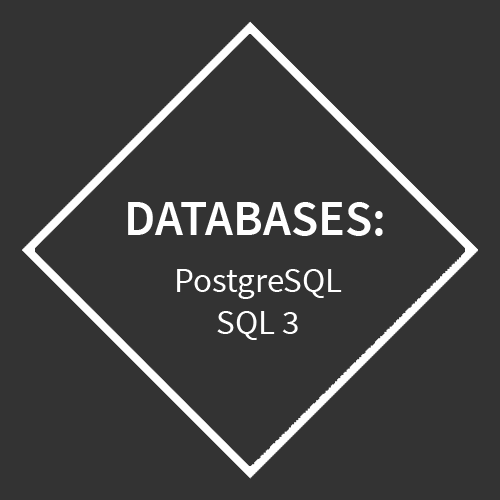
<style>
.page{position:relative;width:500px;height:500px;background:#333333}
.page>*{position:absolute;margin:0}
.t1{font:35px "SourceSansPro-Regular";color:#ffffff}
</style>
<div class="page">
<p class="t1" style="left:177px;top:269px;width:165px;height:71px;text-align:center">PostgreSQL<br>SQL 3</p>
</div>
